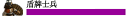
<style>
.page{position:relative;width:127px;height:16px;background:#ffffff}
.page>*{position:absolute;margin:0}
.t1{font:8px "SimSun";letter-spacing:-0.05em;color:#151715;text-transform:uppercase}
</style>
<div class="page">
<p class="t1" style="left:26px;top:0px;width:31px;height:8px">盾牌士兵</p>
</div>
